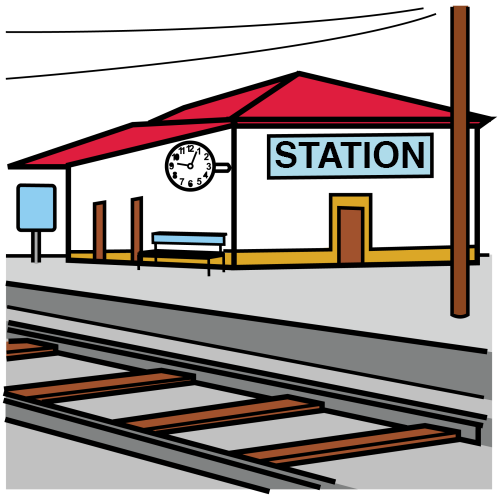
<style>
.page{position:relative;width:500px;height:500px;background:#ffffff}
.page>*{position:absolute;margin:0}
.t1{font:36px "Helvetica-Bold";color:#000000}
</style>
<div class="page">
<p class="t1" style="left:275px;top:141px;width:149px;height:27px">STATION</p>
</div>
